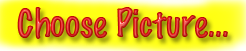
<style>
.page{position:relative;width:246px;height:51px}
.page>*{position:absolute;margin:0}
.t1{font:36px "MarkerFelt-Thin"}
</style>
<div class="page">
<p class="t1" style="left:17px;top:7px;width:211px;height:32px">Choose Picture...</p>
</div>
